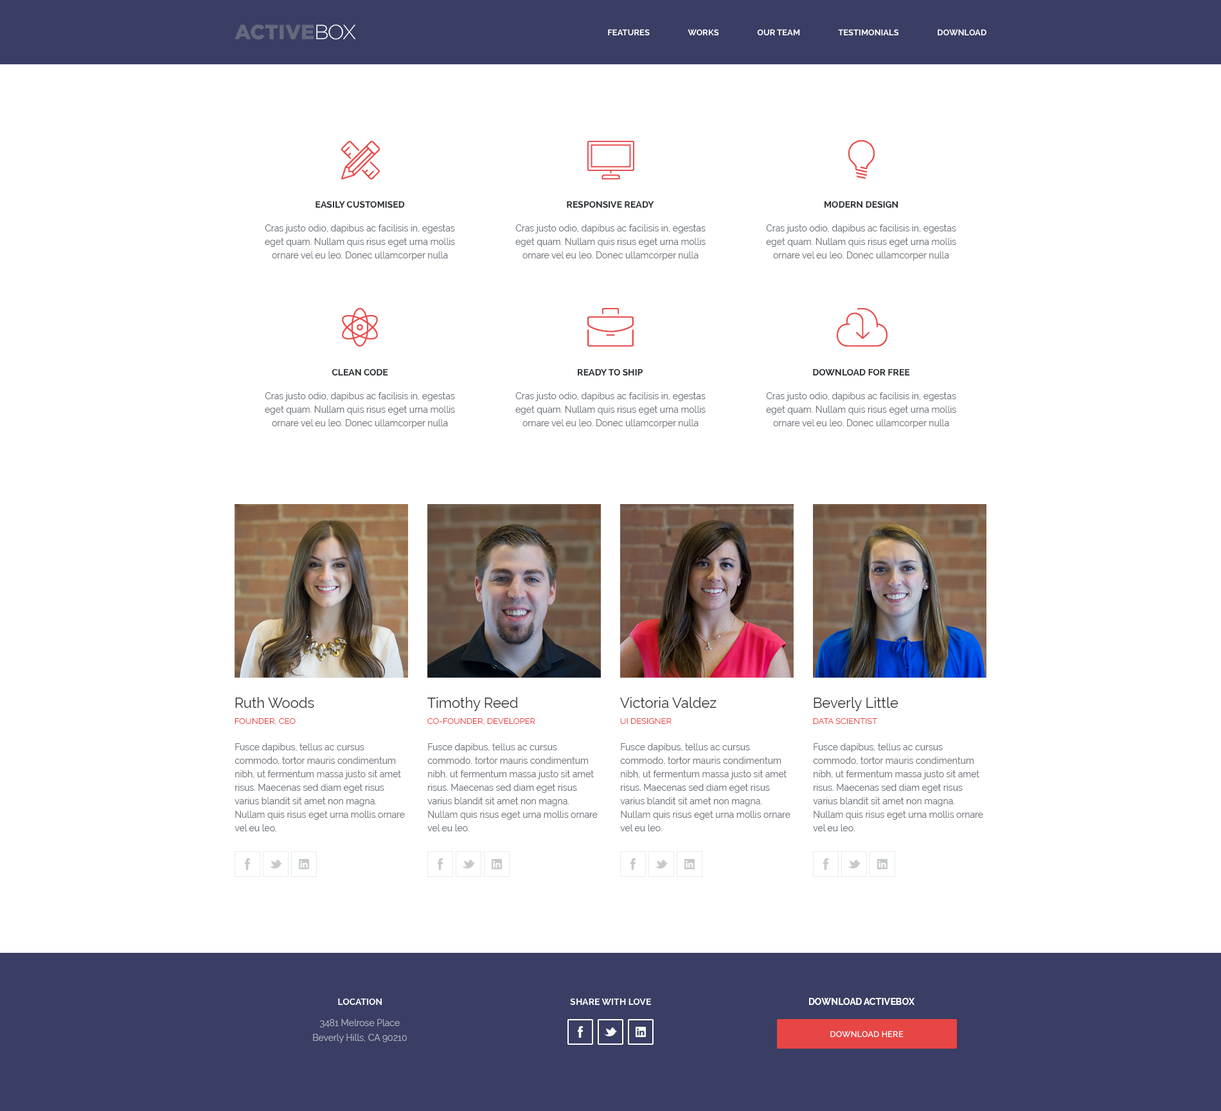
<style>
.page{position:relative;width:1221px;height:1111px;background:#ffffff}
.page>*{position:absolute;margin:0}
.t1{font:8.4px "Raleway-Bold";color:#ffffff;text-transform:uppercase}
.t2{font:9px "Raleway-Bold";color:#2d3033;text-transform:uppercase}
.t3{font:9px/13.5px "Raleway-Regular";color:#6c7279}
.t4{font:14.1px "Raleway-Regular";color:#2d3033}
.t5{font:8.4px "Raleway-Regular";color:#e84545;text-transform:uppercase}
.t6{font:9px "Raleway-Bold";color:#ffffff;text-transform:uppercase}
.t7{font:9px/14.5px "Raleway-Regular";color:#afb0bc}
.t8{font:8.4px "Raleway-SemiBold";color:#ffffff;text-transform:uppercase}
</style>
<div class="page">
<p class="t1" style="left:608px;top:29px;width:42px;height:7px">Features</p>
<p class="t1" style="left:688px;top:29px;width:31px;height:7px">Works</p>
<p class="t1" style="left:757px;top:29px;width:43px;height:6px">Our Team</p>
<p class="t1" style="left:838px;top:29px;width:61px;height:7px">Testimonials</p>
<p class="t1" style="left:938px;top:29px;width:49px;height:6px">Download</p>
<p class="t2" style="left:316px;top:201px;width:89px;height:7px">Easily Customised</p>
<p class="t2" style="left:567px;top:201px;width:87px;height:7px">Responsive REady</p>
<p class="t2" style="left:825px;top:201px;width:73px;height:7px">Modern Design</p>
<p class="t3" style="left:265px;top:224px;width:190px;height:36px;text-align:center">Cras justo odio, dapibus ac facilisis in, egestas eget quam. Nullam quis risus eget urna mollis ornare vel eu leo. Donec ullamcorper nulla non metus auctor fringilla.</p>
<p class="t3" style="left:516px;top:224px;width:190px;height:36px;text-align:center">Cras justo odio, dapibus ac facilisis in, egestas eget quam. Nullam quis risus eget urna mollis ornare vel eu leo. Donec ullamcorper nulla non metus auctor fringilla.</p>
<p class="t3" style="left:766px;top:224px;width:191px;height:36px;text-align:center">Cras justo odio, dapibus ac facilisis in, egestas eget quam. Nullam quis risus eget urna mollis ornare vel eu leo. Donec ullamcorper nulla non metus auctor fringilla.</p>
<p class="t2" style="left:332px;top:369px;width:56px;height:7px">Clean Code</p>
<p class="t2" style="left:578px;top:369px;width:65px;height:7px">Ready to Ship</p>
<p class="t2" style="left:813px;top:369px;width:97px;height:6px">Download for Free</p>
<p class="t3" style="left:265px;top:392px;width:190px;height:36px;text-align:center">Cras justo odio, dapibus ac facilisis in, egestas eget quam. Nullam quis risus eget urna mollis ornare vel eu leo. Donec ullamcorper nulla non metus auctor fringilla.</p>
<p class="t3" style="left:516px;top:392px;width:190px;height:36px;text-align:center">Cras justo odio, dapibus ac facilisis in, egestas eget quam. Nullam quis risus eget urna mollis ornare vel eu leo. Donec ullamcorper nulla non metus auctor fringilla.</p>
<p class="t3" style="left:766px;top:392px;width:191px;height:36px;text-align:center">Cras justo odio, dapibus ac facilisis in, egestas eget quam. Nullam quis risus eget urna mollis ornare vel eu leo. Donec ullamcorper nulla non metus auctor fringilla.</p>
<p class="t4" style="left:235px;top:697px;width:79px;height:11px">Ruth Woods</p>
<p class="t4" style="left:428px;top:697px;width:90px;height:14px">Timothy Reed</p>
<p class="t4" style="left:620px;top:697px;width:97px;height:11px">Victoria Valdez</p>
<p class="t4" style="left:814px;top:697px;width:85px;height:14px">Beverly Little</p>
<p class="t5" style="left:235px;top:718px;width:61px;height:6px">Founder, CEO</p>
<p class="t5" style="left:428px;top:718px;width:108px;height:6px">Co-Founder, Developer</p>
<p class="t5" style="left:620px;top:718px;width:52px;height:6px">UI Designer</p>
<p class="t5" style="left:813px;top:718px;width:65px;height:6px">Data Scientist</p>
<p class="t3" style="left:235px;top:743px;width:170px;height:88px">Fusce dapibus, tellus ac cursus commodo, tortor mauris condimentum nibh, ut fermentum massa justo sit amet risus. Maecenas sed diam eget risus varius blandit sit amet non magna. Nullam quis risus eget urna mollis ornare vel eu leo.</p>
<p class="t3" style="left:428px;top:743px;width:170px;height:88px">Fusce dapibus, tellus ac cursus commodo, tortor mauris condimentum nibh, ut fermentum massa justo sit amet risus. Maecenas sed diam eget risus varius blandit sit amet non magna. Nullam quis risus eget urna mollis ornare vel eu leo.</p>
<p class="t3" style="left:620px;top:743px;width:171px;height:88px">Fusce dapibus, tellus ac cursus commodo, tortor mauris condimentum nibh, ut fermentum massa justo sit amet risus. Maecenas sed diam eget risus varius blandit sit amet non magna. Nullam quis risus eget urna mollis ornare vel eu leo.</p>
<p class="t3" style="left:813px;top:743px;width:171px;height:88px">Fusce dapibus, tellus ac cursus commodo, tortor mauris condimentum nibh, ut fermentum massa justo sit amet risus. Maecenas sed diam eget risus varius blandit sit amet non magna. Nullam quis risus eget urna mollis ornare vel eu leo.</p>
<p class="t6" style="left:338px;top:998px;width:44px;height:7px">Location</p>
<p class="t6" style="left:570px;top:998px;width:81px;height:7px">Share with Love</p>
<p class="t6" style="left:809px;top:998px;width:106px;height:7px">DOWNLOAD ActiveBox</p>
<p class="t7" style="left:313px;top:1019px;width:94px;height:24px;text-align:center">3481 Melrose Place<br>Beverly Hills, CA 90210</p>
<p class="t8" style="left:831px;top:1030px;width:73px;height:7px">Download Here</p>
</div>
